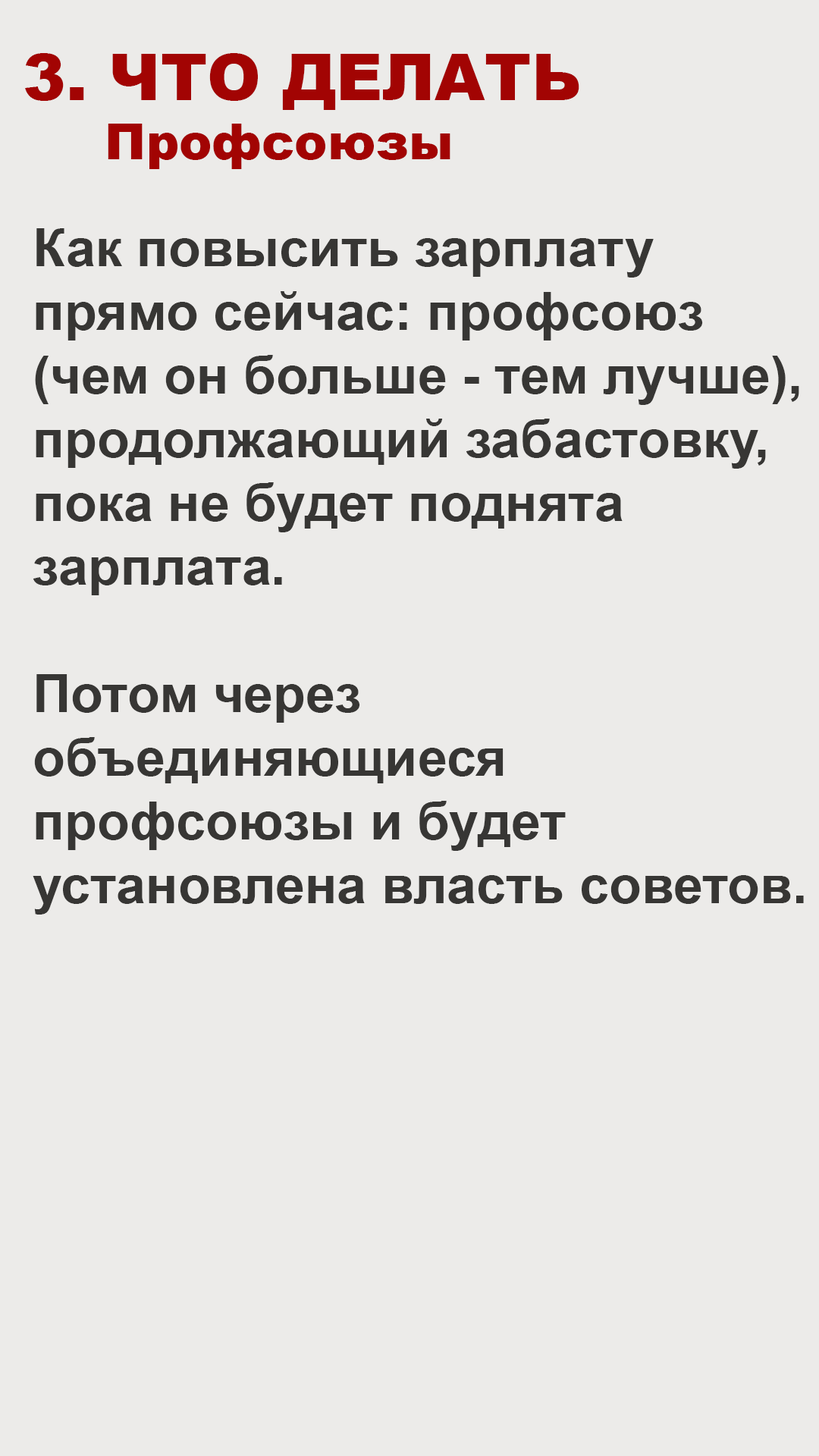
<style>
.page{position:relative;width:819px;height:1456px;background:#ecebe9}
.page>*{position:absolute;margin:0}
.t1{font:64.5px "Arial-Black";color:#a20403}
.t2{font:49.3px "Arial-Black";color:#a20403}
.t3{font:53.1px "Arial-BoldMT";color:#373634}
</style>
<div class="page">
<p class="t1" style="left:25px;top:53px;width:554px;height:116px">3. ЧТО ДЕЛАТЬ<br><span class="t2">     Профсоюзы</span></p>
<p class="t3" style="left:33px;top:228px;width:771px;height:687px">Как повысить зарплату<br>прямо сейчас: профсоюз<br>(чем он больше - тем лучше),<br>продолжающий забастовку,<br>пока не будет поднята <br>зарплата.<br><br>Потом через <br>объединяющиеся<br>профсоюзы и будет <br>установлена власть советов.</p>
</div>
